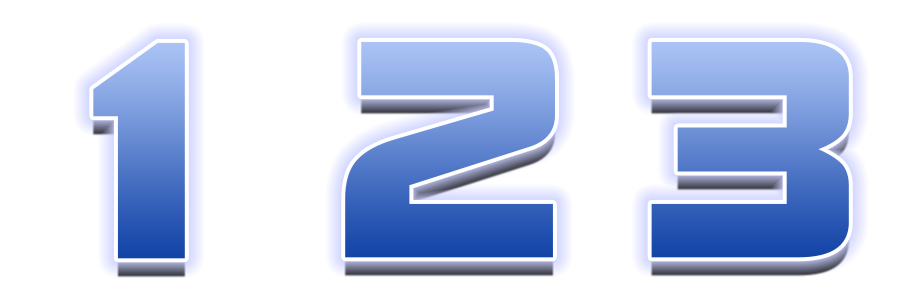
<style>
.page{position:relative;width:900px;height:300px;background:#ffffff}
.page>*{position:absolute;margin:0}
.t1{font:300px "DFSoGei-W9-WINP-RKSJ-H"}
</style>
<div class="page">
<p class="t1" style="left:345px;top:41px;width:210px;height:217px">2</p>
<p class="t1" style="left:651px;top:41px;width:198px;height:217px">3</p>
<p class="t1" style="left:93px;top:42px;width:92px;height:217px">1</p>
</div>
